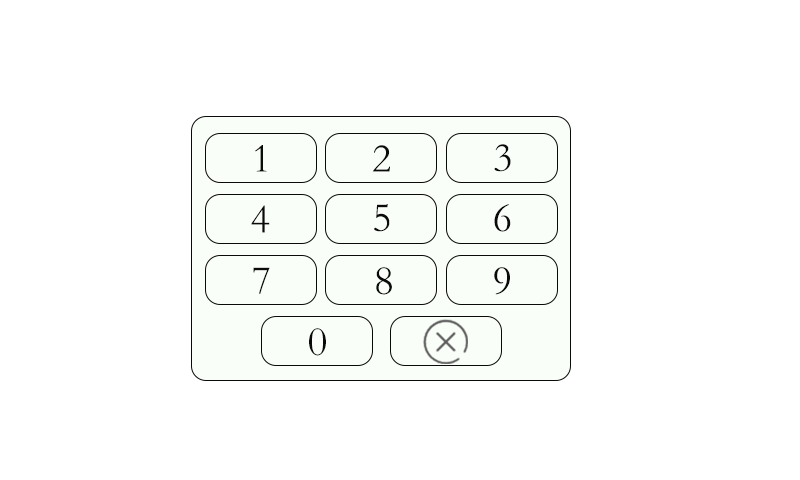
<style>
.page{position:relative;width:800px;height:480px;background:#ffffff}
.page>*{position:absolute;margin:0}
.t1{font:41.7px "STKaiti";color:#0a0a0a}
</style>
<div class="page">
<p class="t1" style="left:255px;top:145px;width:12px;height:27px">1</p>
<p class="t1" style="left:372px;top:145px;width:18px;height:27px">2</p>
<p class="t1" style="left:494px;top:144px;width:17px;height:28px">3</p>
<p class="t1" style="left:251px;top:205px;width:19px;height:28px">4</p>
<p class="t1" style="left:374px;top:204px;width:16px;height:28px">5</p>
<p class="t1" style="left:494px;top:204px;width:17px;height:28px">6</p>
<p class="t1" style="left:253px;top:267px;width:17px;height:27px">7</p>
<p class="t1" style="left:376px;top:267px;width:16px;height:28px">8</p>
<p class="t1" style="left:494px;top:267px;width:16px;height:28px">9</p>
<p class="t1" style="left:309px;top:328px;width:17px;height:28px">0</p>
</div>
